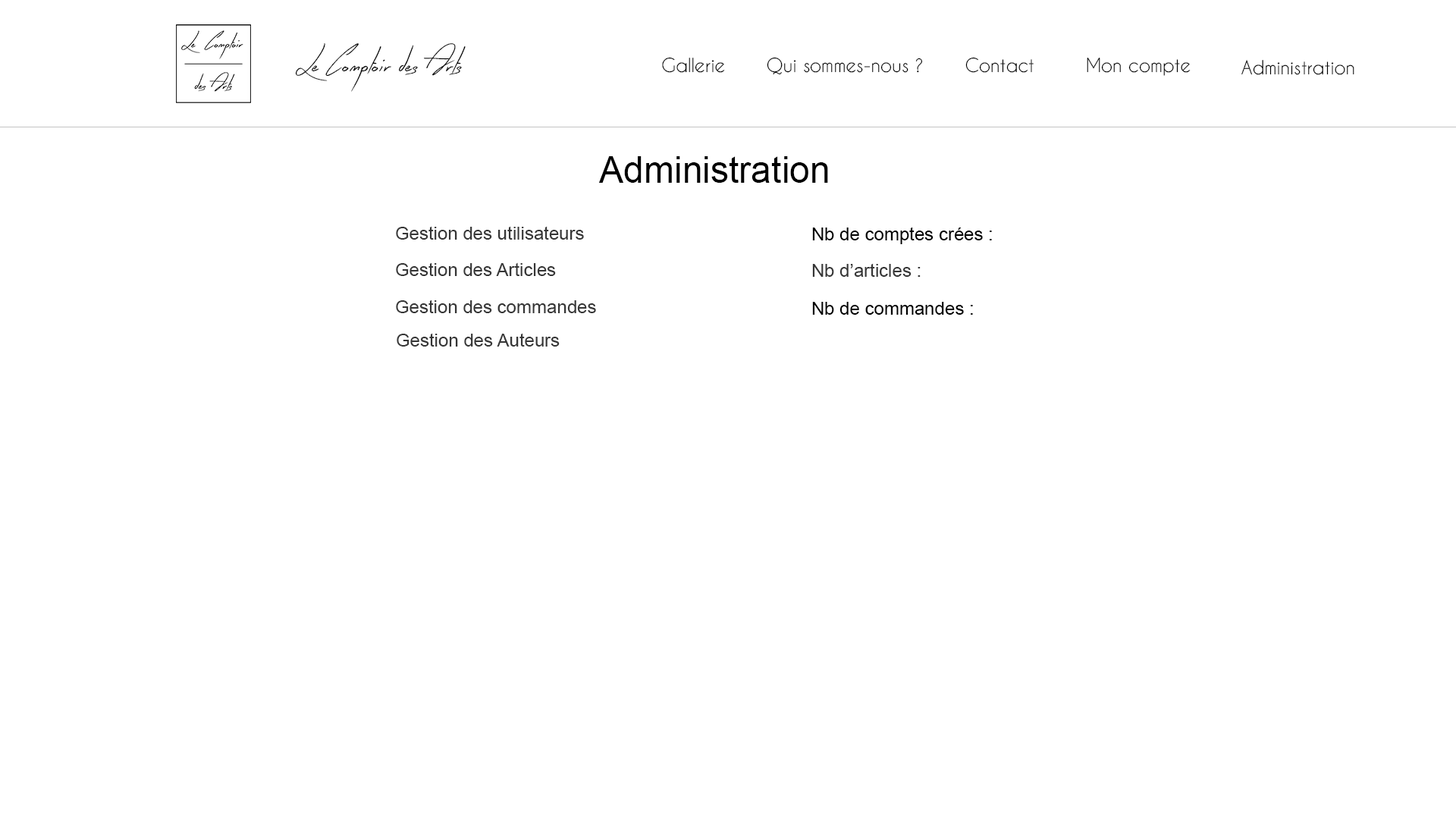
<style>
.page{position:relative;width:1456px;height:819px;background:#ffffff}
.page>*{position:absolute;margin:0}
.t1{font:33.4px "EarlyBird";color:#000000}
.t2{font:18.2px "CaviarDreams";color:#000000}
.t3{font:36.4px "ArialMT";color:#000000}
.t4{font:18.2px "ArialMT";color:#363636}
.t5{font:18.2px "ArialMT";color:#000000}
</style>
<div class="page">
<p class="t1" style="left:295px;top:43px;width:171px;height:49px">Le Comptoir des Arts</p>
<p class="t2" style="left:662px;top:57px;width:63px;height:16px">Gallerie</p>
<p class="t2" style="left:767px;top:57px;width:156px;height:18px">Qui sommes-nous ?</p>
<p class="t2" style="left:965px;top:57px;width:69px;height:16px">Contact</p>
<p class="t2" style="left:1087px;top:58px;width:104px;height:18px">Mon compte</p>
<p class="t2" style="left:1241px;top:60px;width:113px;height:15px">Administration</p>
<p class="t3" style="left:598px;top:156px;width:230px;height:27px">Administration</p>
<p class="t4" style="left:396px;top:226px;width:188px;height:14px">Gestion des utilisateurs</p>
<p class="t5" style="left:812px;top:227px;width:180px;height:17px">Nb de comptes crées :</p>
<p class="t4" style="left:396px;top:262px;width:160px;height:14px">Gestion des Articles</p>
<p class="t4" style="left:812px;top:263px;width:109px;height:14px">Nb d’articles :</p>
<p class="t4" style="left:396px;top:300px;width:200px;height:13px">Gestion des commandes</p>
<p class="t5" style="left:812px;top:302px;width:161px;height:13px">Nb de commandes :</p>
<p class="t4" style="left:397px;top:333px;width:163px;height:14px">Gestion des Auteurs</p>
</div>
